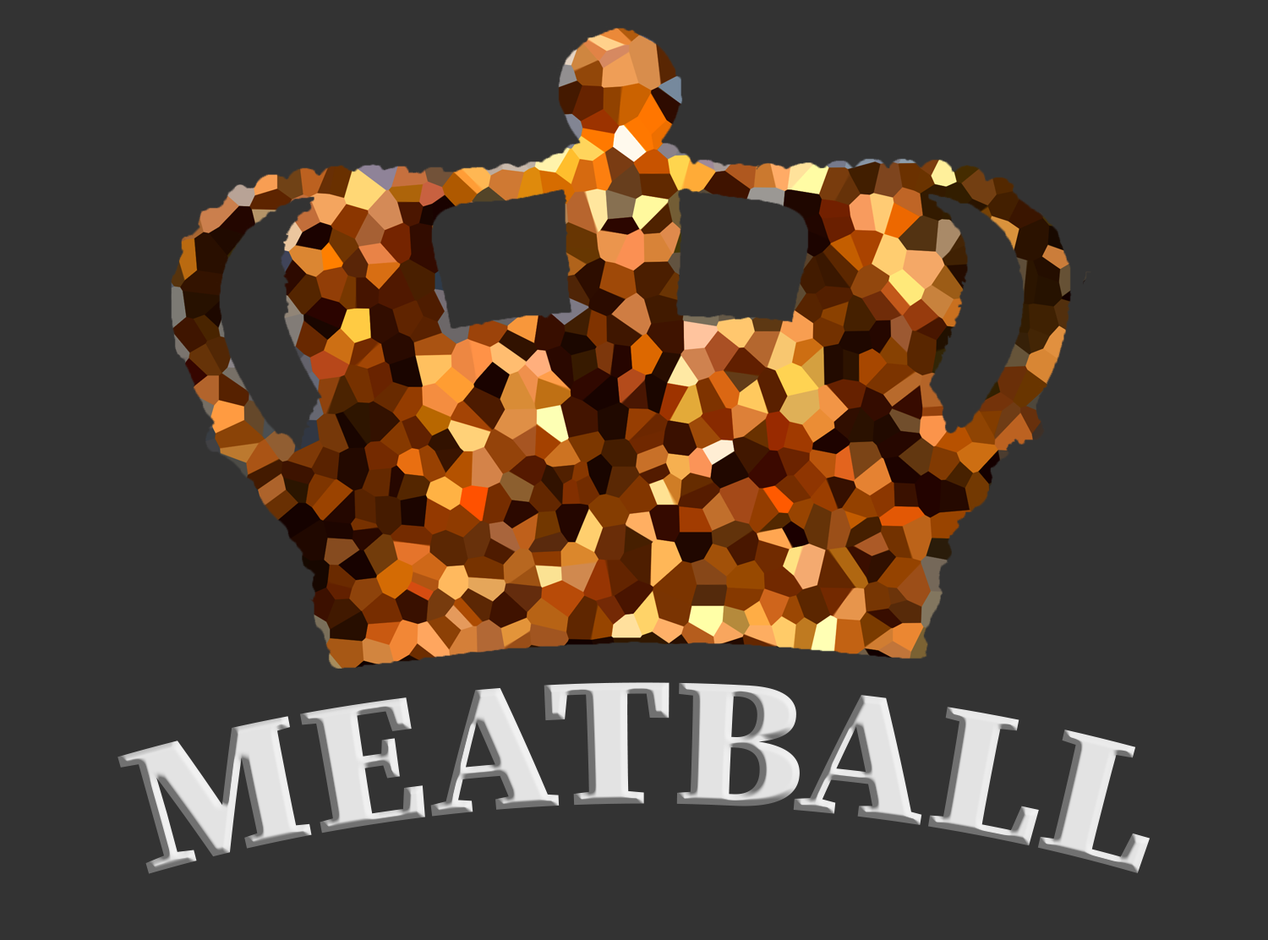
<style>
.page{position:relative;width:1268px;height:940px;background:#333333}
.page>*{position:absolute;margin:0}
.t1{font:185.4px "SourceSerifRoman-Black";color:#e3e3e3}
</style>
<div class="page">
<p class="t1" style="left:118px;top:682px;width:1033px;height:192px">MEATBALL</p>
</div>
